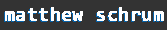
<style>
.page{position:relative;width:167px;height:30px;background:#333333}
.page>*{position:absolute;margin:0}
.t1{font:18.6px "Consolas";color:#ffffff;font-weight:bold;scale:1.03 1}
</style>
<div class="page">
<p class="t1" style="left:5px;top:7px;width:159px;height:14px">matthew schrum</p>
</div>
